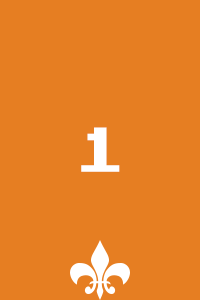
<style>
.page{position:relative;width:200px;height:300px;background:#e67e22}
.page>*{position:absolute;margin:0}
.t1{font:50.4px "PressStart2P-Regular";color:#ffffff}
</style>
<div class="page">
<p class="t1" style="left:81px;top:127px;width:39px;height:45px">1</p>
</div>
